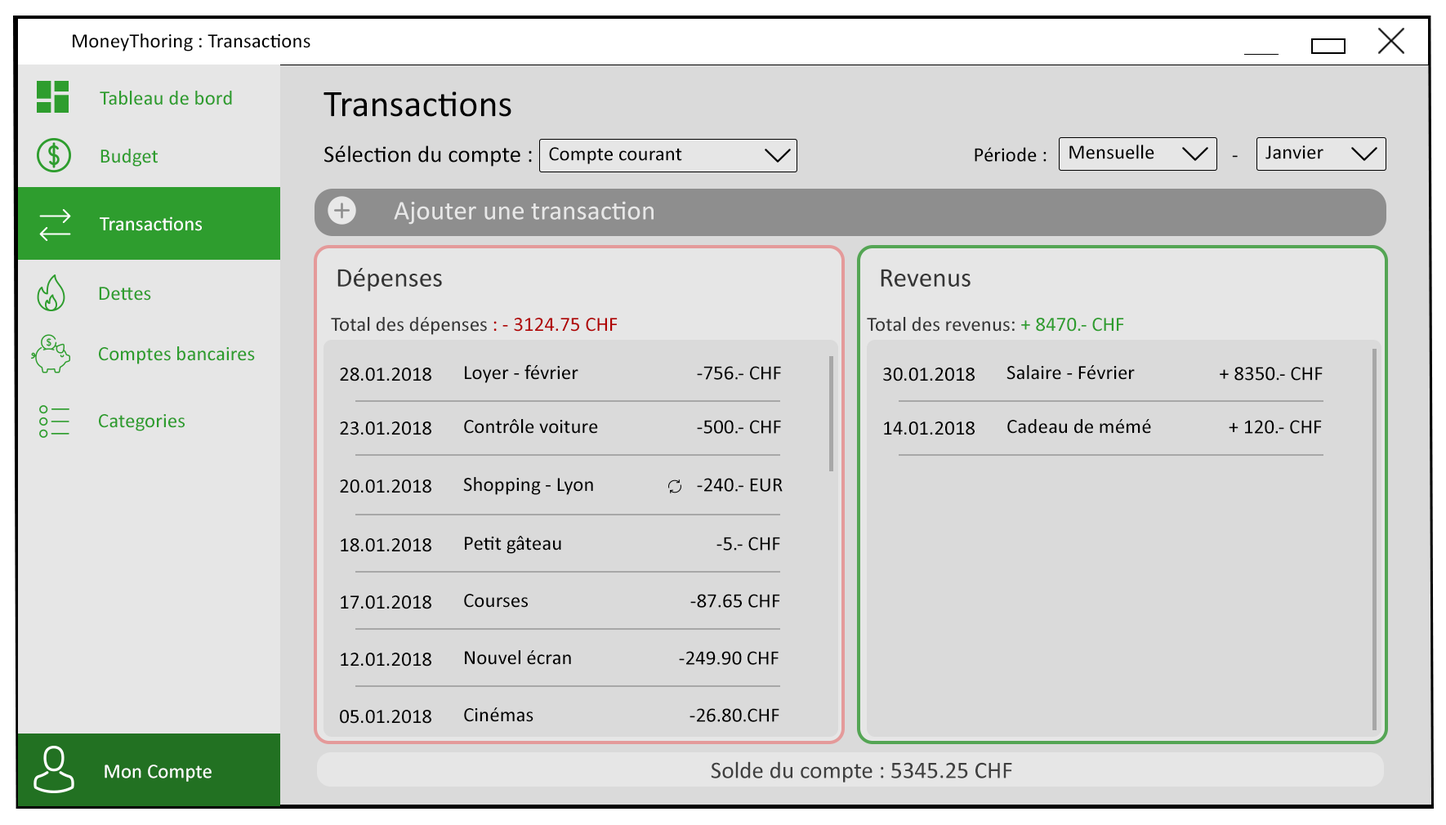
<style>
.page{position:relative;width:1446px;height:825px;background:#dadada}
.page>*{position:absolute;margin:0}
.t1{font:20.4px "Calibri";color:#010101}
.t2{font:20.4px "Calibri";color:#2e9d2e}
.t3{font:37.4px "Calibri";color:#000000}
.t4{font:23.8px "Calibri";color:#000000}
.t5{font:20.4px "Calibri";color:#000000}
.t6{font:27.2px "Calibri";color:#e7e7e7}
.t7{font:20.4px "Calibri";color:#fefefe}
.t8{font:27.2px "Calibri";color:#363636}
.t9{font:20.4px "Calibri";color:#363636}
.t10{font:20.4px "Calibri";color:#b00000}
.t11{font:23.8px "Calibri";color:#3f3f3f}
.t12{font:20.4px "Calibri";color:#ffffff}
</style>
<div class="page">
<p class="t1" style="left:73px;top:33px;width:237px;height:18px">MoneyThoring : Transactions</p>
<p class="t2" style="left:100px;top:91px;width:132px;height:14px">Tableau de bord</p>
<p class="t3" style="left:323px;top:91px;width:188px;height:26px">Transactions</p>
<p class="t2" style="left:100px;top:149px;width:58px;height:18px">Budget</p>
<p class="t4" style="left:324px;top:145px;width:208px;height:22px">Sélection du compte :</p>
<p class="t5" style="left:549px;top:147px;width:133px;height:17px">Compte courant</p>
<p class="t5" style="left:974px;top:147px;width:263px;height:15px">Période :                                        -</p>
<p class="t5" style="left:1069px;top:145px;width:85px;height:14px">Mensuelle</p>
<p class="t5" style="left:1265px;top:145px;width:58px;height:14px">Janvier</p>
<p class="t6" style="left:394px;top:201px;width:259px;height:24px">Ajouter une transaction</p>
<p class="t7" style="left:100px;top:216px;width:102px;height:15px">Transactions</p>
<p class="t8" style="left:337px;top:268px;width:105px;height:24px">Dépenses</p>
<p class="t8" style="left:880px;top:269px;width:90px;height:18px">Revenus</p>
<p class="t2" style="left:99px;top:287px;width:52px;height:14px">Dettes</p>
<p class="t9" style="left:331px;top:317px;width:286px;height:18px">Total des dépenses<span class="t10"> : - 3124.75 CHF</span></p>
<p class="t9" style="left:867px;top:317px;width:257px;height:15px">Total des revenus: <span class="t2">+ 8470.- CHF</span></p>
<p class="t2" style="left:99px;top:346px;width:156px;height:18px">Comptes bancaires</p>
<p class="t5" style="left:465px;top:364px;width:113px;height:19px">Loyer - février</p>
<p class="t5" style="left:697px;top:366px;width:84px;height:14px">-756.- CHF</p>
<p class="t5" style="left:1006px;top:365px;width:128px;height:15px">Salaire - Février</p>
<p class="t5" style="left:340px;top:368px;width:91px;height:13px">28.01.2018</p>
<p class="t5" style="left:883px;top:368px;width:91px;height:13px">30.01.2018</p>
<p class="t5" style="left:1219px;top:367px;width:103px;height:14px">+ 8350.- CHF</p>
<p class="t2" style="left:99px;top:414px;width:86px;height:17px">Categories</p>
<p class="t5" style="left:340px;top:421px;width:91px;height:14px">23.01.2018</p>
<p class="t5" style="left:464px;top:419px;width:134px;height:15px">Contrôle voiture</p>
<p class="t5" style="left:697px;top:420px;width:84px;height:14px">-500.- CHF</p>
<p class="t5" style="left:884px;top:421px;width:90px;height:14px">14.01.2018</p>
<p class="t5" style="left:1007px;top:419px;width:144px;height:15px">Cadeau de mémé</p>
<p class="t5" style="left:1228px;top:420px;width:93px;height:14px">+ 120.- CHF</p>
<p class="t5" style="left:340px;top:479px;width:91px;height:14px">20.01.2018</p>
<p class="t5" style="left:463px;top:477px;width:130px;height:18px">Shopping - Lyon</p>
<p class="t5" style="left:697px;top:478px;width:85px;height:14px">-240.- EUR</p>
<p class="t5" style="left:341px;top:538px;width:90px;height:14px">18.01.2018</p>
<p class="t5" style="left:465px;top:536px;width:96px;height:18px">Petit gâteau</p>
<p class="t5" style="left:716px;top:537px;width:64px;height:13px">-5.- CHF</p>
<p class="t5" style="left:464px;top:594px;width:64px;height:14px">Courses</p>
<p class="t5" style="left:690px;top:594px;width:90px;height:14px">-87.65 CHF</p>
<p class="t5" style="left:341px;top:595px;width:90px;height:14px">17.01.2018</p>
<p class="t5" style="left:341px;top:653px;width:90px;height:13px">12.01.2018</p>
<p class="t5" style="left:465px;top:650px;width:106px;height:15px">Nouvel écran</p>
<p class="t5" style="left:679px;top:651px;width:99px;height:14px">-249.90 CHF</p>
<p class="t5" style="left:340px;top:710px;width:91px;height:14px">05.01.2018</p>
<p class="t5" style="left:464px;top:707px;width:69px;height:15px">Cinémas</p>
<p class="t5" style="left:689px;top:708px;width:90px;height:14px">-26.80.CHF</p>
<p class="t11" style="left:711px;top:761px;width:301px;height:21px">Solde du compte : 5345.25 CHF</p>
<p class="t12" style="left:105px;top:764px;width:107px;height:18px">Mon Compte</p>
</div>
